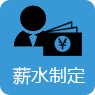
<style>
.page{position:relative;width:95px;height:95px;background:#3998d6}
.page>*{position:absolute;margin:0}
.t1{font:18px "MicrosoftYaHei";color:#ffffff}
</style>
<div class="page">
<p class="t1" style="left:13px;top:67px;width:72px;height:18px">薪水制定</p>
</div>
